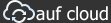
<style>
.page{position:relative;width:111px;height:23px;background:#333333}
.page>*{position:absolute;margin:0}
.t1{font:18px "Tahoma";color:#ffffff}
</style>
<div class="page">
<p class="t1" style="left:36px;top:6px;width:72px;height:15px">auf cloud</p>
</div>
